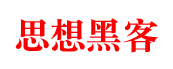
<style>
.page{position:relative;width:173px;height:69px;background:#ffffff}
.page>*{position:absolute;margin:0}
.t1{font:36px "STSongti-SC-Black";color:#f90000}
</style>
<div class="page">
<p class="t1" style="left:15px;top:18px;width:144px;height:35px">思想黑客</p>
</div>
